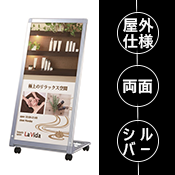
<style>
.page{position:relative;width:175px;height:175px;background:#000000}
.page>*{position:absolute;margin:0}
.t1{font:7.4px/15.5px "YuGothicUI-Semibold";color:#ffffff}
.t2{font:7.4px "YuGothicUI-Semibold";color:#ffffff}
.t3{font:7.4px/15.5px "YuGothicUI-Semibold";letter-spacing:0.307em;color:#ffffff}
</style>
<div class="page">
<p class="t1" style="left:123px;top:17px;width:31px;height:32px">屋外<br>仕様</p>
<p class="t2" style="left:122px;top:79px;width:31px;height:15px">両面</p>
<p class="t3" style="left:123px;top:127px;width:30px;height:29px">シル<br>バー</p>
</div>
